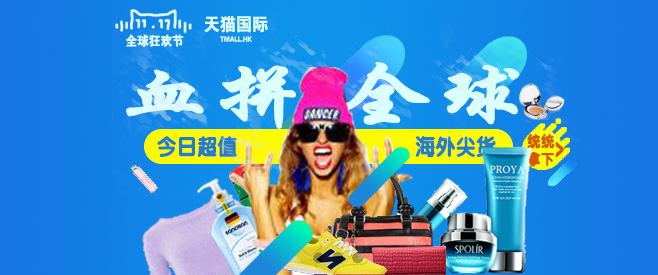
<style>
.page{position:relative;width:658px;height:275px}
.page>*{position:absolute;margin:0}
.t1{font:18px "FZDHTJW--GB1-0";letter-spacing:-0.005em;color:#dbffff;scale:0.9 1}
.t2{font:13px "FZDHTJW--GB1-0";letter-spacing:-0.005em;color:#dbffff;scale:0.9 1}
.t3{font:7px "FZDHTJW--GB1-0";letter-spacing:-0.005em;color:#dbffff;scale:0.9 1}
.t4{font:71.4px "FZXKFW--GB1-0";letter-spacing:-0.005em;color:#dbffff;font-weight:bold;scale:1.31 1}
.t5{font:22px "FZY4JW--GB1-0";letter-spacing:-0.005em;color:#237dc9;font-weight:bold;scale:0.9 1}
.t6{font:15px/18px "FZY4JW--GB1-0";letter-spacing:-0.005em;color:#d45a00;font-weight:bold;scale:0.9 1}
.t7{font:28px "FZY4JW--GB1-0";letter-spacing:-0.005em;color:#d45a00;font-weight:bold;scale:0.52 1}
</style>
<div class="page">
<p class="t1" style="left:204px;top:16px;width:64px;height:17px">天猫国际</p>
<p class="t2" style="left:125px;top:34px;width:59px;height:13px">全球狂欢节</p>
<p class="t3" style="left:220px;top:36px;width:32px;height:6px">TMALL.HK</p>
<p class="t4" style="left:126px;top:62px;width:394px;height:67px">血拼 全球</p>
<p class="t5" style="left:157px;top:135px;width:80px;height:23px">今日超值</p>
<p class="t5" style="left:415px;top:135px;width:81px;height:23px">海外尖货</p>
<p class="t6" style="left:527px;top:134px;width:28px;height:33px;text-align:center">统统<br>拿下</p>
<p class="t7" style="left:555px;top:142px;width:9px;height:16px">&gt;</p>
</div>
